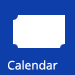
<style>
.page{position:relative;width:75px;height:75px;background:#0e3eaa}
.page>*{position:absolute;margin:0}
.t1{font:12px "OpenSans";color:#ffffff}
</style>
<div class="page">
<p class="t1" style="left:8px;top:60px;width:50px;height:10px">Calendar</p>
</div>
